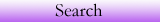
<style>
.page{position:relative;width:160px;height:22px}
.page>*{position:absolute;margin:0}
.t1{font:18.7px "Garamond";color:#000000}
</style>
<div class="page">
<p class="t1" style="left:55px;top:3px;width:48px;height:14px">Search</p>
</div>
